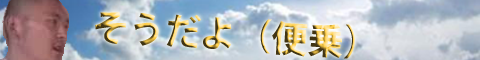
<style>
.page{position:relative;width:480px;height:60px}
.page>*{position:absolute;margin:0}
.t1{font:36px "KozGoPro-Bold"}
</style>
<div class="page">
<p class="t1" style="left:95px;top:12px;width:260px;height:47px;rotate:4deg">そうだよ（便乗）</p>
</div>
